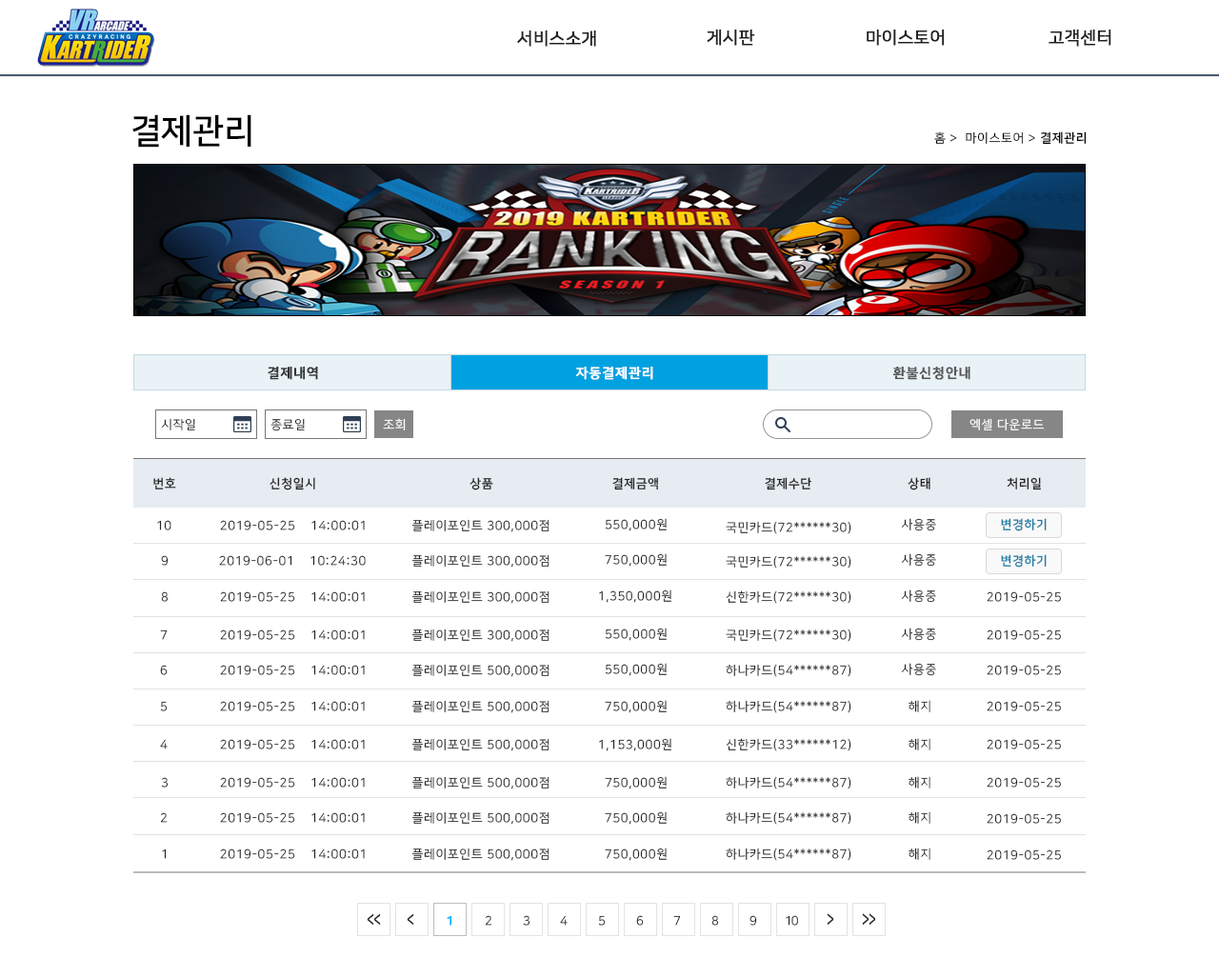
<style>
.page{position:relative;width:1219px;height:978px;background:#ffffff}
.page>*{position:absolute;margin:0}
.t1{font:17.1px "NanumSquareR";color:#222222;font-weight:bold}
.t2{font:34.3px "NanumSquareB";color:#000000}
.t3{font:12.4px "NanumSquareR";letter-spacing:0.05em;color:#000000}
.t4{font:12.4px "NanumSquareB";letter-spacing:0.05em;color:#000000}
.t5{font:13.3px "NanumSquareB";letter-spacing:0.05em;color:#333333;font-weight:bold}
.t6{font:13.3px "NanumSquareB";letter-spacing:0.05em;color:#ffffff;font-weight:bold}
.t7{font:13.3px "NanumSquareB";letter-spacing:0.05em;color:#555555;font-weight:bold}
.t8{font:12.4px "NanumSquareR";letter-spacing:0.05em;color:#222222}
.t9{font:12.4px "NanumSquareR";letter-spacing:0.05em;color:#ffffff}
.t10{font:12.4px "NanumSquareB";letter-spacing:0.05em;color:#222222}
.t11{font:12.4px "NanumSquareB";letter-spacing:0.05em;color:#1d7da3}
.t12{font:12.4px "NanumSquareR";letter-spacing:0.05em}
.t13{font:19.5px "NanumSquareB";letter-spacing:-0.075em;color:#222222;scale:0.63 1}
.t14{font:12.4px "NanumSquareB";letter-spacing:-0.075em;color:#00b6ff;font-weight:bold}
.t15{font:12.4px "NanumSquareR";letter-spacing:-0.075em}
.t16{font:12.4px "NanumSquareR";letter-spacing:-0.075em;color:#222222}
.t17{font:20.1px "NanumSquareB";letter-spacing:-0.075em;color:#222222;scale:0.61 1}
</style>
<div class="page">
<p class="t1" style="left:517px;top:30px;width:79px;height:17px">서비스소개</p>
<p class="t1" style="left:707px;top:29px;width:48px;height:17px">게시판</p>
<p class="t1" style="left:867px;top:29px;width:78px;height:17px">마이스토어</p>
<p class="t1" style="left:1049px;top:29px;width:62px;height:17px">고객센터</p>
<p class="t2" style="left:132px;top:114px;width:119px;height:34px">결제관리</p>
<p class="t3" style="left:934px;top:131px;width:153px;height:14px">홈 &gt;  마이스토어 &gt; <span class="t4">결제관리</span></p>
<p class="t5" style="left:268px;top:366px;width:50px;height:14px">결제내역</p>
<p class="t6" style="left:576px;top:366px;width:77px;height:14px">자동결제관리</p>
<p class="t7" style="left:892px;top:366px;width:79px;height:14px">환불신청안내</p>
<p class="t8" style="left:161px;top:418px;width:34px;height:12px">시작일</p>
<p class="t8" style="left:270px;top:418px;width:35px;height:13px">종료일</p>
<p class="t9" style="left:383px;top:418px;width:23px;height:12px">조회</p>
<p class="t9" style="left:970px;top:418px;width:75px;height:12px">엑셀 다운로드</p>
<p class="t10" style="left:153px;top:477px;width:23px;height:13px">번호</p>
<p class="t10" style="left:270px;top:477px;width:45px;height:13px">신청일시</p>
<p class="t10" style="left:470px;top:477px;width:23px;height:13px">상품</p>
<p class="t10" style="left:612px;top:477px;width:46px;height:13px">결제금액</p>
<p class="t10" style="left:765px;top:477px;width:46px;height:13px">결제수단</p>
<p class="t10" style="left:908px;top:477px;width:23px;height:13px">상태</p>
<p class="t10" style="left:1007px;top:477px;width:34px;height:13px">처리일</p>
<p class="t8" style="left:157px;top:520px;width:14px;height:10px">10</p>
<p class="t8" style="left:220px;top:520px;width:145px;height:10px">2019-05-25    14:00:01</p>
<p class="t8" style="left:411px;top:519px;width:139px;height:13px">플레이포인트 300,000점</p>
<p class="t8" style="left:605px;top:518px;width:62px;height:13px">550,000원</p>
<p class="t8" style="left:726px;top:521px;width:125px;height:13px">국민카드(72******30)</p>
<p class="t8" style="left:901px;top:518px;width:35px;height:13px">사용중</p>
<p class="t11" style="left:1001px;top:518px;width:46px;height:13px">변경하기</p>
<p class="t8" style="left:161px;top:555px;width:8px;height:11px">9</p>
<p class="t8" style="left:219px;top:555px;width:147px;height:11px">2019-06-01    10:24:30</p>
<p class="t8" style="left:411px;top:554px;width:139px;height:14px">플레이포인트 300,000점</p>
<p class="t8" style="left:605px;top:553px;width:62px;height:14px">750,000원</p>
<p class="t8" style="left:726px;top:555px;width:125px;height:14px">국민카드(72******30)</p>
<p class="t8" style="left:901px;top:553px;width:35px;height:14px">사용중</p>
<p class="t11" style="left:1001px;top:554px;width:46px;height:14px">변경하기</p>
<p class="t12" style="left:161px;top:591px;width:8px;height:11px">8</p>
<p class="t8" style="left:220px;top:591px;width:145px;height:11px">2019-05-25    14:00:01</p>
<p class="t8" style="left:411px;top:590px;width:139px;height:14px">플레이포인트 300,000점</p>
<p class="t8" style="left:599px;top:590px;width:72px;height:13px">1,350,000원</p>
<p class="t8" style="left:726px;top:590px;width:125px;height:14px">신한카드(72******30)</p>
<p class="t8" style="left:901px;top:590px;width:35px;height:13px">사용중</p>
<p class="t8" style="left:987px;top:591px;width:74px;height:11px">2019-05-25</p>
<p class="t8" style="left:160px;top:630px;width:8px;height:10px">7</p>
<p class="t8" style="left:220px;top:630px;width:145px;height:10px">2019-05-25    14:00:01</p>
<p class="t8" style="left:411px;top:629px;width:139px;height:13px">플레이포인트 300,000점</p>
<p class="t8" style="left:605px;top:628px;width:62px;height:13px">550,000원</p>
<p class="t8" style="left:726px;top:629px;width:125px;height:13px">국민카드(72******30)</p>
<p class="t8" style="left:901px;top:628px;width:35px;height:13px">사용중</p>
<p class="t8" style="left:987px;top:630px;width:74px;height:10px">2019-05-25</p>
<p class="t12" style="left:160px;top:665px;width:8px;height:10px">6</p>
<p class="t8" style="left:220px;top:665px;width:145px;height:10px">2019-05-25    14:00:01</p>
<p class="t8" style="left:411px;top:664px;width:139px;height:13px">플레이포인트 500,000점</p>
<p class="t8" style="left:605px;top:663px;width:62px;height:13px">550,000원</p>
<p class="t8" style="left:726px;top:664px;width:125px;height:13px">하나카드(54******87)</p>
<p class="t8" style="left:901px;top:663px;width:35px;height:13px">사용중</p>
<p class="t8" style="left:987px;top:665px;width:74px;height:10px">2019-05-25</p>
<p class="t12" style="left:160px;top:701px;width:8px;height:10px">5</p>
<p class="t8" style="left:220px;top:701px;width:145px;height:10px">2019-05-25    14:00:01</p>
<p class="t8" style="left:411px;top:700px;width:139px;height:13px">플레이포인트 500,000점</p>
<p class="t8" style="left:605px;top:700px;width:62px;height:13px">750,000원</p>
<p class="t8" style="left:726px;top:700px;width:125px;height:13px">하나카드(54******87)</p>
<p class="t8" style="left:909px;top:700px;width:22px;height:12px">해지</p>
<p class="t8" style="left:987px;top:701px;width:74px;height:10px">2019-05-25</p>
<p class="t12" style="left:160px;top:739px;width:8px;height:11px">4</p>
<p class="t8" style="left:220px;top:739px;width:145px;height:11px">2019-05-25    14:00:01</p>
<p class="t8" style="left:411px;top:738px;width:139px;height:13px">플레이포인트 500,000점</p>
<p class="t8" style="left:599px;top:738px;width:72px;height:13px">1,153,000원</p>
<p class="t8" style="left:726px;top:738px;width:125px;height:13px">신한카드(33******12)</p>
<p class="t8" style="left:909px;top:738px;width:22px;height:13px">해지</p>
<p class="t8" style="left:987px;top:739px;width:74px;height:11px">2019-05-25</p>
<p class="t8" style="left:161px;top:777px;width:8px;height:11px">3</p>
<p class="t8" style="left:220px;top:777px;width:145px;height:11px">2019-05-25    14:00:01</p>
<p class="t8" style="left:411px;top:776px;width:139px;height:14px">플레이포인트 500,000점</p>
<p class="t8" style="left:605px;top:776px;width:62px;height:14px">750,000원</p>
<p class="t8" style="left:726px;top:776px;width:125px;height:14px">하나카드(54******87)</p>
<p class="t8" style="left:909px;top:776px;width:22px;height:13px">해지</p>
<p class="t8" style="left:987px;top:777px;width:74px;height:11px">2019-05-25</p>
<p class="t12" style="left:160px;top:812px;width:8px;height:11px">2</p>
<p class="t8" style="left:220px;top:812px;width:145px;height:11px">2019-05-25    14:00:01</p>
<p class="t8" style="left:411px;top:811px;width:139px;height:14px">플레이포인트 500,000점</p>
<p class="t8" style="left:605px;top:811px;width:62px;height:14px">750,000원</p>
<p class="t8" style="left:726px;top:811px;width:125px;height:14px">하나카드(54******87)</p>
<p class="t8" style="left:909px;top:811px;width:22px;height:13px">해지</p>
<p class="t8" style="left:987px;top:813px;width:74px;height:11px">2019-05-25</p>
<p class="t8" style="left:162px;top:849px;width:5px;height:10px">1</p>
<p class="t8" style="left:220px;top:849px;width:145px;height:10px">2019-05-25    14:00:01</p>
<p class="t8" style="left:411px;top:848px;width:139px;height:13px">플레이포인트 500,000점</p>
<p class="t8" style="left:605px;top:848px;width:62px;height:13px">750,000원</p>
<p class="t8" style="left:726px;top:848px;width:125px;height:13px">하나카드(54******87)</p>
<p class="t8" style="left:909px;top:848px;width:22px;height:12px">해지</p>
<p class="t8" style="left:987px;top:850px;width:74px;height:10px">2019-05-25</p>
<p class="t13" style="left:367px;top:913px;width:14px;height:13px">&lt;&lt;</p>
<p class="t13" style="left:407px;top:913px;width:7px;height:13px">&lt;</p>
<p class="t14" style="left:447px;top:915px;width:5px;height:11px">1</p>
<p class="t15" style="left:485px;top:915px;width:7px;height:11px">2</p>
<p class="t16" style="left:523px;top:915px;width:7px;height:11px">3</p>
<p class="t15" style="left:560px;top:915px;width:8px;height:11px">4</p>
<p class="t15" style="left:598px;top:915px;width:8px;height:11px">5</p>
<p class="t15" style="left:636px;top:915px;width:8px;height:11px">6</p>
<p class="t16" style="left:673px;top:915px;width:8px;height:11px">7</p>
<p class="t15" style="left:711px;top:915px;width:8px;height:11px">8</p>
<p class="t16" style="left:750px;top:915px;width:7px;height:11px">9</p>
<p class="t16" style="left:786px;top:915px;width:12px;height:11px">10</p>
<p class="t17" style="left:827px;top:913px;width:7px;height:13px;rotate:180deg">&lt;</p>
<p class="t17" style="left:862px;top:913px;width:14px;height:13px;rotate:180deg">&lt;&lt;</p>
</div>
